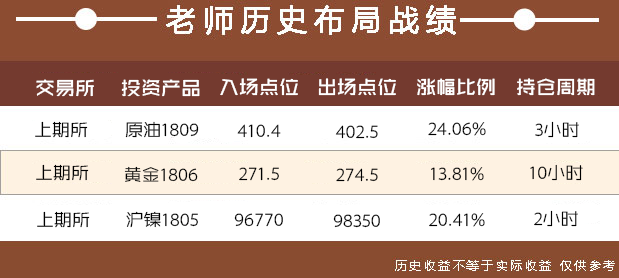
<style>
.page{position:relative;width:619px;height:278px;background:#ffffff}
.page>*{position:absolute;margin:0}
.t1{font:20px "BigYoungBoldGB2.0";color:#ffffff}
.t2{font:18px "BigruixianRegularGB2.0";color:#000000}
</style>
<div class="page">
<p class="t1" style="left:220px;top:78px;width:78px;height:18px">入场点位</p>
<p class="t1" style="left:318px;top:78px;width:78px;height:18px">出场点位</p>
<p class="t1" style="left:417px;top:78px;width:78px;height:18px">涨幅比例</p>
<p class="t1" style="left:517px;top:78px;width:78px;height:18px">持仓周期</p>
<p class="t1" style="left:36px;top:79px;width:58px;height:18px">交易所</p>
<p class="t1" style="left:121px;top:79px;width:79px;height:18px">投资产品</p>
<p class="t2" style="left:35px;top:121px;width:53px;height:17px">上期所</p>
<p class="t2" style="left:125px;top:121px;width:74px;height:17px">原油1809</p>
<p class="t2" style="left:237px;top:124px;width:44px;height:14px">410.4</p>
<p class="t2" style="left:335px;top:125px;width:43px;height:14px">402.5</p>
<p class="t2" style="left:428px;top:122px;width:58px;height:14px">24.06%</p>
<p class="t2" style="left:535px;top:121px;width:44px;height:17px">3小时</p>
<p class="t2" style="left:36px;top:164px;width:53px;height:17px">上期所</p>
<p class="t2" style="left:124px;top:166px;width:74px;height:16px">黄金1806</p>
<p class="t2" style="left:239px;top:167px;width:40px;height:14px">271.5</p>
<p class="t2" style="left:336px;top:168px;width:42px;height:14px">274.5</p>
<p class="t2" style="left:431px;top:167px;width:53px;height:14px">13.81%</p>
<p class="t2" style="left:530px;top:164px;width:53px;height:17px">10小时</p>
<p class="t2" style="left:37px;top:211px;width:53px;height:17px">上期所</p>
<p class="t2" style="left:126px;top:211px;width:72px;height:17px">沪镍1805</p>
<p class="t2" style="left:234px;top:213px;width:49px;height:14px">96770</p>
<p class="t2" style="left:333px;top:214px;width:47px;height:14px">98350</p>
<p class="t2" style="left:429px;top:213px;width:56px;height:14px">20.41%</p>
<p class="t2" style="left:534px;top:210px;width:44px;height:17px">2小时</p>
</div>
